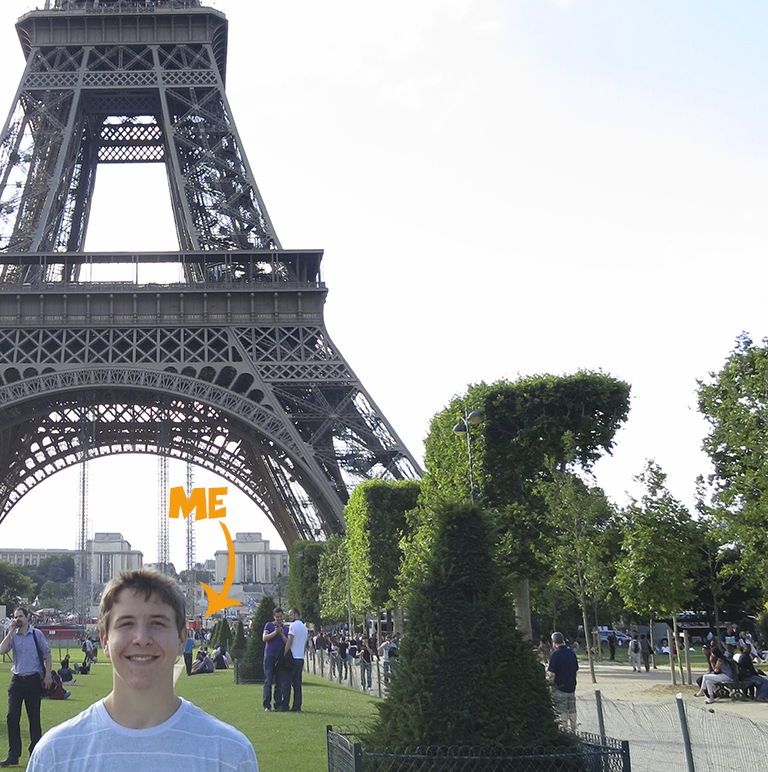
<style>
.page{position:relative;width:768px;height:772px}
.page>*{position:absolute;margin:0}
.t1{font:36px "BigBook-Heavy";color:#f39c12}
</style>
<div class="page">
<p class="t1" style="left:168px;top:486px;width:60px;height:35px">Me</p>
</div>
